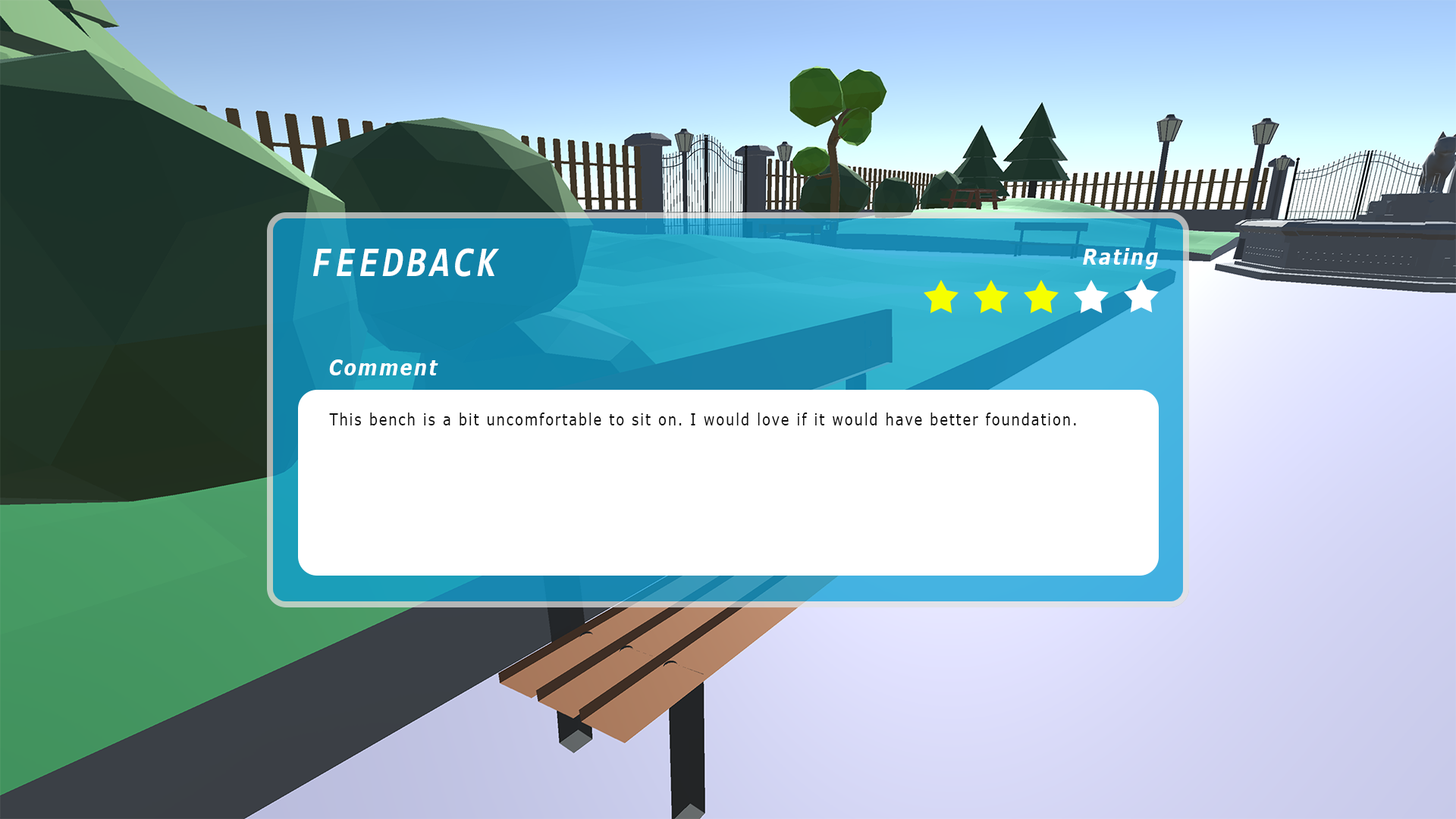
<style>
.page{position:relative;width:1456px;height:819px}
.page>*{position:absolute;margin:0}
.t1{font:42.6px "Consolas-BoldItalic";letter-spacing:0.1em;color:#ffffff;scale:0.85 1}
.t2{font:21.3px "Verdana-BoldItalic";letter-spacing:0.1em;color:#ffffff;scale:0.85 1}
.t3{font:16px "Verdana";letter-spacing:0.1em;color:#0f0f0f;scale:0.85 1}
</style>
<div class="page">
<p class="t1" style="left:313px;top:248px;width:186px;height:29px">FEEDBACK</p>
<p class="t2" style="left:1083px;top:248px;width:75px;height:21px">Rating</p>
<p class="t2" style="left:329px;top:359px;width:109px;height:16px">Comment</p>
<p class="t3" style="left:329px;top:413px;width:747px;height:12px">This bench is a bit uncomfortable to sit on. I would love if it would have better foundation.</p>
</div>
